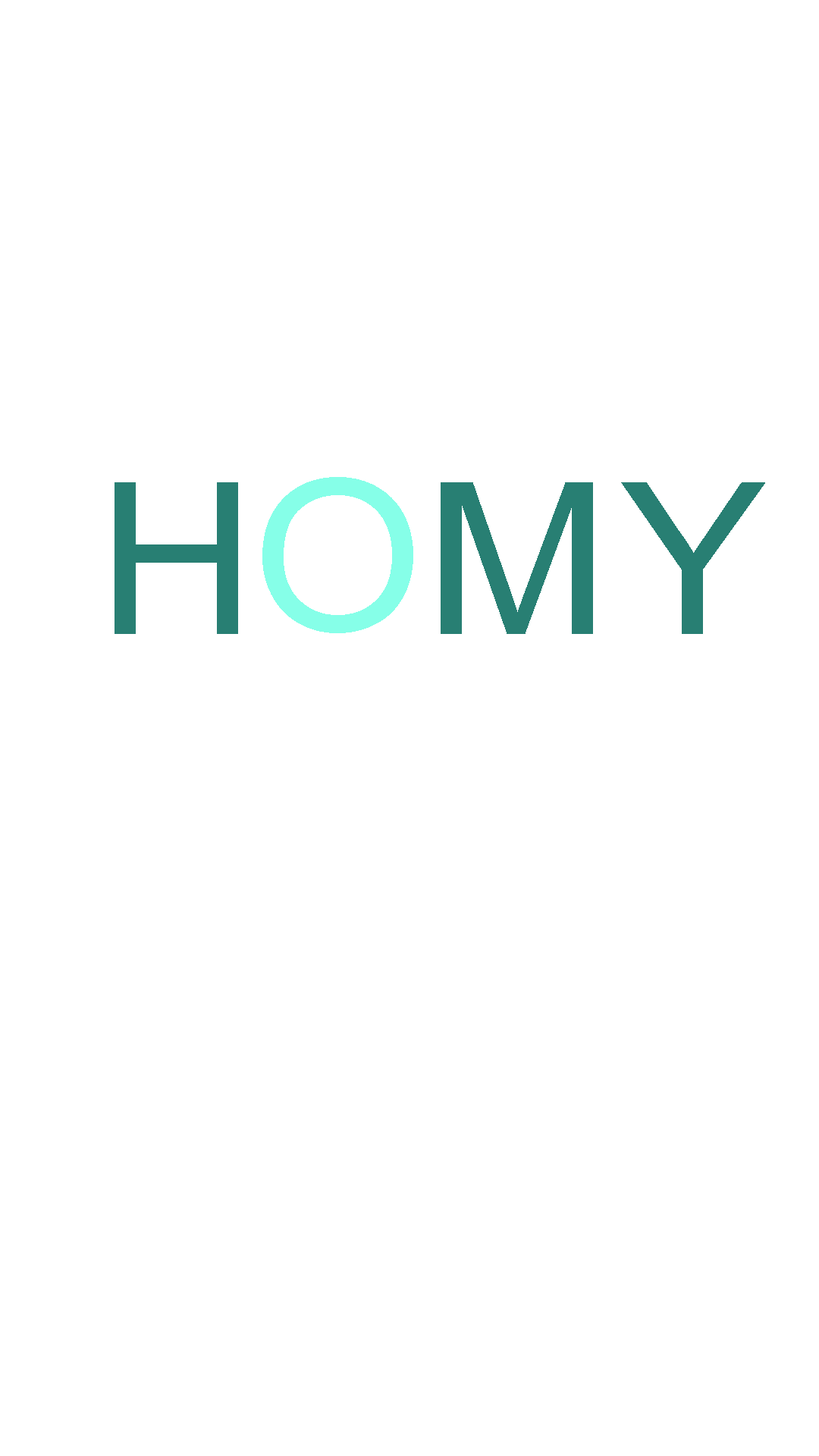
<style>
.page{position:relative;width:819px;height:1456px;background:#ffffff}
.page>*{position:absolute;margin:0}
.t1{font:211.7px "ArialMT";color:#287f72;scale:1.04 1}
.t2{font:211.7px "ArialMT";color:#86ffe8;scale:1.04 1}
</style>
<div class="page">
<p class="t1" style="left:115px;top:482px;width:123px;height:152px">H</p>
<p class="t2" style="left:262px;top:477px;width:151px;height:156px">O</p>
<p class="t1" style="left:441px;top:482px;width:152px;height:152px">M</p>
<p class="t1" style="left:621px;top:482px;width:144px;height:152px">Y</p>
</div>
